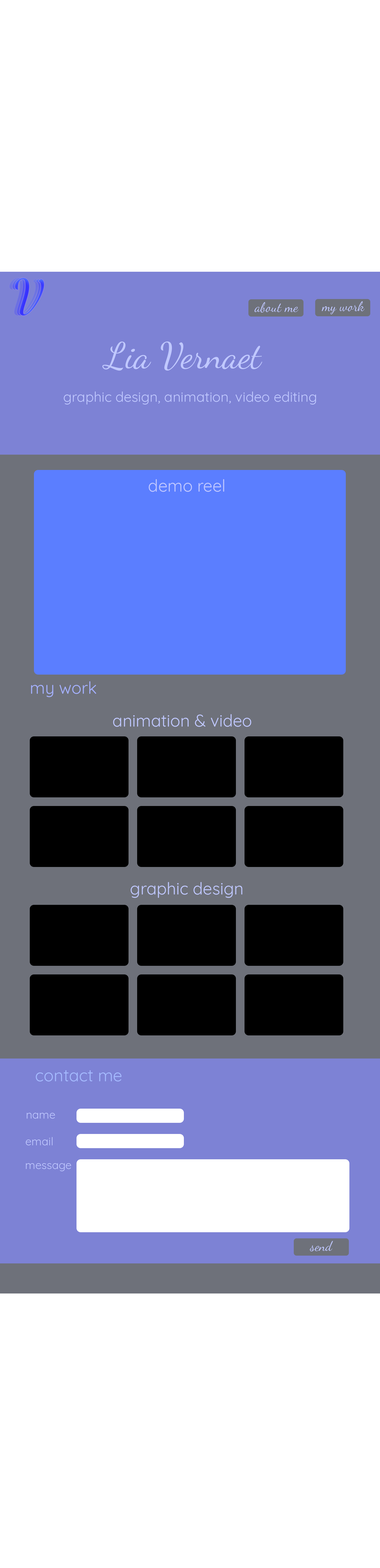
<style>
.page{position:relative;width:380px;height:1568px;background:#ffffff}
.page>*{position:absolute;margin:0}
.t1{font:13.4px "DancingScriptOT";color:#c0c8ff}
.t2{font:36.2px "DancingScriptOT";color:#c0c8ff}
.t3{font:13.9px "Quicksand-Regular";color:#c0c8ff}
.t4{font:16.7px "Quicksand-Regular";color:#c0c8ff}
.t5{font:16.7px "Quicksand-Regular";color:#a5b1ff}
.t6{font:16.7px "Quicksand-Regular";color:#a5baff}
.t7{font:11.1px "Quicksand-Regular";color:#c0c8ff}
</style>
<div class="page">
<p class="t1" style="left:255px;top:302px;width:44px;height:11px">about me</p>
<p class="t1" style="left:322px;top:301px;width:43px;height:13px">my work</p>
<p class="t2" style="left:102px;top:341px;width:161px;height:30px">Lia Vernaet</p>
<p class="t3" style="left:64px;top:391px;width:252px;height:14px">graphic design, animation, video editing</p>
<p class="t4" style="left:149px;top:479px;width:75px;height:13px">demo reel</p>
<p class="t5" style="left:31px;top:681px;width:65px;height:16px">my work</p>
<p class="t4" style="left:113px;top:714px;width:139px;height:13px">animation &amp; video</p>
<p class="t4" style="left:131px;top:882px;width:111px;height:16px">graphic design</p>
<p class="t6" style="left:36px;top:1070px;width:86px;height:12px">contact me</p>
<p class="t7" style="left:27px;top:1113px;width:28px;height:6px">name</p>
<p class="t7" style="left:26px;top:1137px;width:27px;height:8px">email</p>
<p class="t7" style="left:26px;top:1163px;width:45px;height:8px">message</p>
<p class="t1" style="left:310px;top:1241px;width:23px;height:10px">send</p>
</div>
